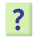
<style>
.page{position:relative;width:38px;height:38px;background:#ffffff}
.page>*{position:absolute;margin:0}
.t1{font:30px "MetaBold";color:#3d40a3}
</style>
<div class="page">
<p class="t1" style="left:12px;top:8px;width:12px;height:23px">?</p>
</div>
